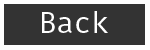
<style>
.page{position:relative;width:150px;height:50px;background:#333333}
.page>*{position:absolute;margin:0}
.t1{font:29.2px "FiraCode-Regular";color:#ffffff}
</style>
<div class="page">
<p class="t1" style="left:42px;top:11px;width:66px;height:22px">Back</p>
</div>
